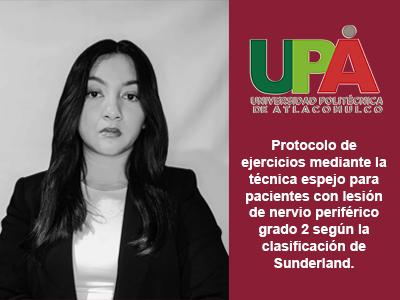
<style>
.page{position:relative;width:400px;height:300px;background:#8a1e35}
.page>*{position:absolute;margin:0}
.t1{font:14px "Arial-BoldMT";color:#ffffff}
</style>
<div class="page">
<p class="t1" style="left:241px;top:140px;width:146px;height:128px;text-align:center">Protocolo de ejercicios mediante la técnica espejo para pacientes con lesión de nervio periférico grado 2 según la clasificación de Sunderland.</p>
</div>
